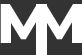
<style>
.page{position:relative;width:82px;height:55px;background:#333333}
.page>*{position:absolute;margin:0}
.t1{font:55.4px "Montserrat-ExtraBold";color:#ffffff}
</style>
<div class="page">
<p class="t1" style="left:0px;top:4px;width:46px;height:39px">M</p>
<p class="t1" style="left:36px;top:4px;width:46px;height:39px">M</p>
</div>
